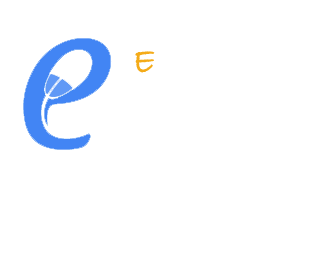
<style>
.page{position:relative;width:325px;height:260px;background:#ffffff}
.page>*{position:absolute;margin:0}
.t1{font:36px "BradleyHandITC";color:#f4ab19;font-weight:bold}
</style>
<div class="page">
<p class="t1" style="left:135px;top:51px;width:20px;height:22px">E</p>
</div>
